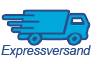
<style>
.page{position:relative;width:100px;height:64px;background:#ffffff}
.page>*{position:absolute;margin:0}
.t1{font:12.7px "Arial-ItalicMT";letter-spacing:-0.013em;color:#2a4d89}
</style>
<div class="page">
<p class="t1" style="left:1px;top:45px;width:90px;height:13px">Expressversand</p>
</div>
